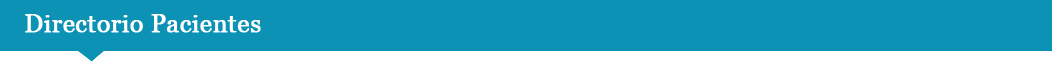
<style>
.page{position:relative;width:1052px;height:61px;background:#0b92b5}
.page>*{position:absolute;margin:0}
.t1{font:25px "Georgia";color:#ffffff;font-weight:bold}
</style>
<div class="page">
<p class="t1" style="left:25px;top:14px;width:236px;height:19px">Directorio Pacientes</p>
</div>
